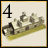
<style>
.page{position:relative;width:48px;height:48px;background:#e9e2d0}
.page>*{position:absolute;margin:0}
.t1{font:18px "TrajanPro-Regular";color:#000000}
</style>
<div class="page">
<p class="t1" style="left:2px;top:4px;width:11px;height:14px">4</p>
</div>
